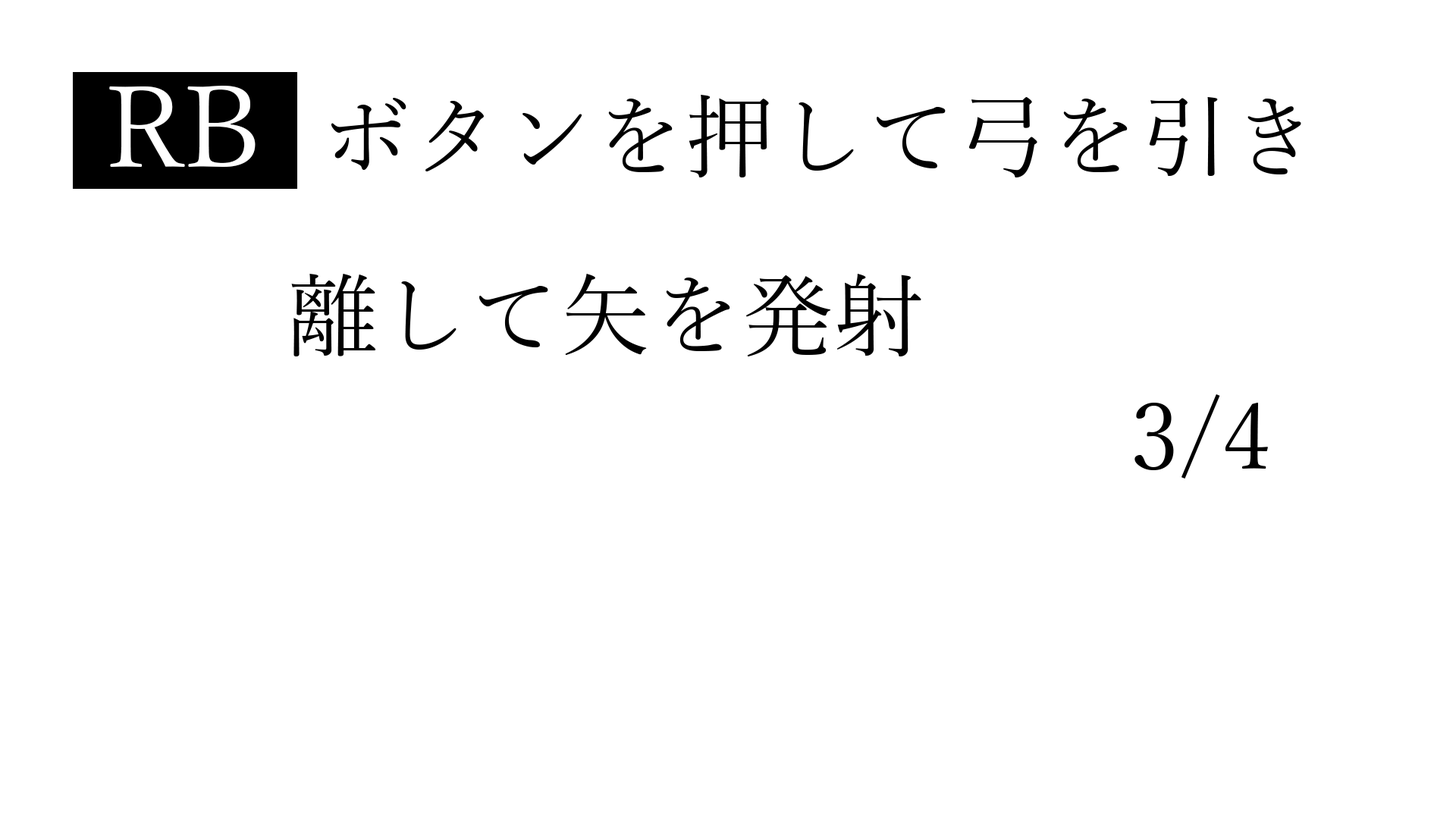
<style>
.page{position:relative;width:1456px;height:819px;background:#ffffff}
.page>*{position:absolute;margin:0}
.t1{font:91px "YuMincho-Regular";color:#000000}
.t2{font:113.7px "YuMincho-Regular";color:#ffffff}
</style>
<div class="page">
<p class="t1" style="left:109px;top:86px;width:1192px;height:270px"><span class="t2">RB  </span>ボタンを押して弓を引き<br>　　離して矢を発射</p>
<p class="t1" style="left:1134px;top:394px;width:134px;height:85px">3/4</p>
</div>
